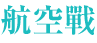
<style>
.page{position:relative;width:97px;height:43px;background:#ffffff}
.page>*{position:absolute;margin:0}
.t1{font:32px "RyuminPro-ExBold";color:#1dbdc0}
</style>
<div class="page">
<p class="t1" style="left:1px;top:4px;width:94px;height:31px">航空戰</p>
</div>
